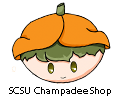
<style>
.page{position:relative;width:120px;height:100px;background:#ffffff}
.page>*{position:absolute;margin:0}
.t1{font:14px "THSarabunNew-Bold";color:#000000}
</style>
<div class="page">
<p class="t1" style="left:9px;top:87px;width:102px;height:9px">SCSU ChampadeeShop</p>
</div>
